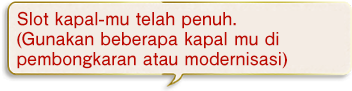
<style>
.page{position:relative;width:352px;height:91px;background:#f4ece4}
.page>*{position:absolute;margin:0}
.t1{font:18px/20px "FutoGoB101Pr5-Bold";color:#bd0800}
</style>
<div class="page">
<p class="t1" style="left:17px;top:11px;width:270px;height:58px">Slot kapal-mu telah penuh.<br>(Gunakan beberapa kapal mu di<br>pembongkaran atau modernisasi)</p>
</div>
